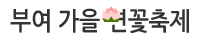
<style>
.page{position:relative;width:200px;height:40px;background:#ffffff}
.page>*{position:absolute;margin:0}
.t1{font:25px "NanumGothicBold";letter-spacing:-0.01em;color:#333333;scale:0.9 1}
</style>
<div class="page">
<p class="t1" style="left:10px;top:8px;width:90px;height:25px">부여 가을</p>
<p class="t1" style="left:108px;top:9px;width:81px;height:24px">연꽃축제</p>
</div>
